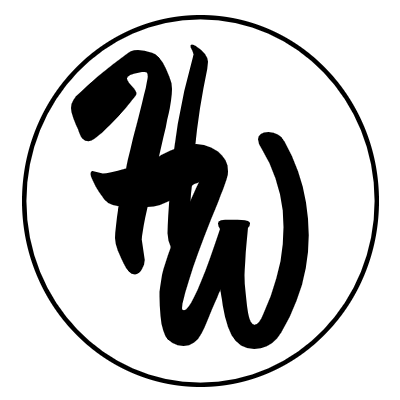
<style>
.page{position:relative;width:400px;height:400px;background:#ffffff}
.page>*{position:absolute;margin:0}
.t1{font:300px "Devonshire-Regular";color:#000000}
</style>
<div class="page">
<p class="t1" style="left:71px;top:44px;width:150px;height:231px">H</p>
<p class="t1" style="left:133px;top:132px;width:176px;height:217px">W</p>
</div>
